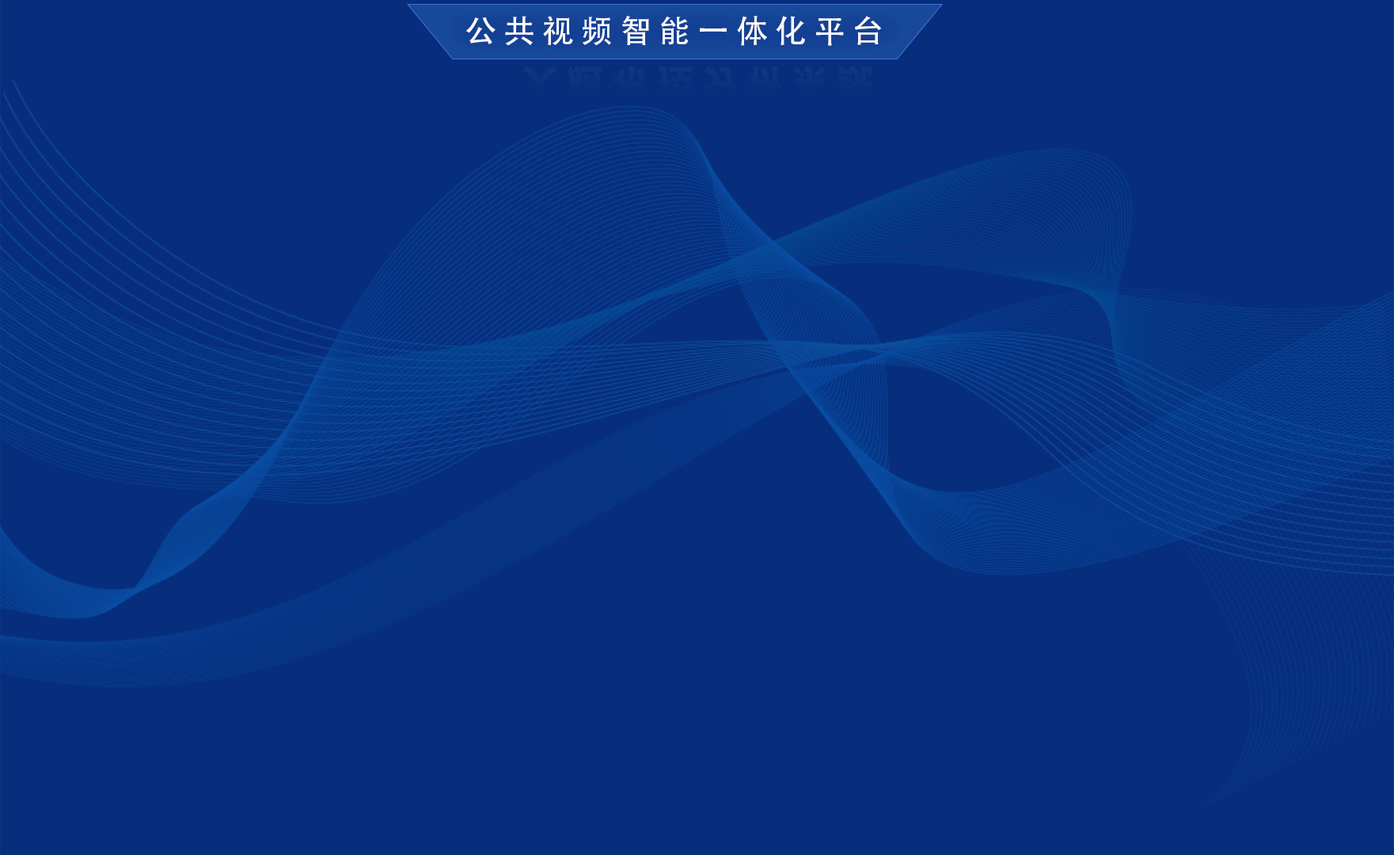
<style>
.page{position:relative;width:1394px;height:855px;background:#072e7d}
.page>*{position:absolute;margin:0}
.t1{font:31.7px "AdobeHeitiStd-Regular";color:#fcfafa}
</style>
<div class="page">
<p class="t1" style="left:466px;top:15px;width:416px;height:31px">公 共 视 频 智 能 一 体 化 平 台</p>
</div>
